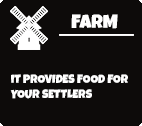
<style>
.page{position:relative;width:142px;height:126px;background:#0d0b0a}
.page>*{position:absolute;margin:0}
.t1{font:19px "LuckiestGuy-Regular";color:#ffffff}
.t2{font:12px "LuckiestGuy-Regular";color:#ffffff}
</style>
<div class="page">
<p class="t1" style="left:71px;top:14px;width:47px;height:15px">FARM</p>
<p class="t2" style="left:10px;top:74px;width:118px;height:25px">iT PROVIDES FOOD FOR YOUR SETTLERS</p>
</div>
